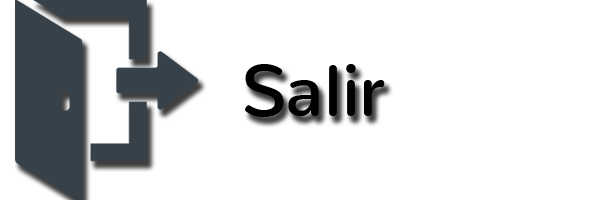
<style>
.page{position:relative;width:600px;height:200px;background:#ffffff}
.page>*{position:absolute;margin:0}
.t1{font:72px "Nunito-SemiBold";color:#000000}
</style>
<div class="page">
<p class="t1" style="left:245px;top:64px;width:140px;height:53px">Salir</p>
</div>
